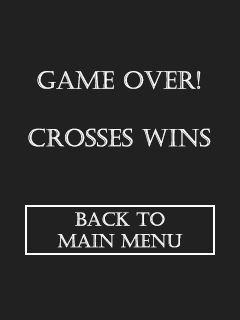
<style>
.page{position:relative;width:240px;height:320px;background:#212121}
.page>*{position:absolute;margin:0}
.t1{font:24px "Castellar";color:#ffffff}
.t2{font:18px "Castellar";color:#ffffff}
</style>
<div class="page">
<p class="t1" style="left:28px;top:71px;width:183px;height:76px;text-align:center">Game OVer!<br><br>Crosses Wins</p>
<p class="t2" style="left:57px;top:212px;width:126px;height:36px;text-align:center">Back to<br>main menu</p>
</div>
